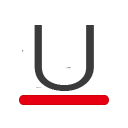
<style>
.page{position:relative;width:128px;height:128px;background:#ffffff}
.page>*{position:absolute;margin:0}
.t1{font:83.1px "AppleGothic";color:#3c3b3b;scale:1.11 1}
</style>
<div class="page">
<p class="t1" style="left:34px;top:25px;width:60px;height:66px">U</p>
</div>
